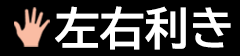
<style>
.page{position:relative;width:240px;height:56px;background:#000000}
.page>*{position:absolute;margin:0}
.t1{font:44.8px "BIZ-UDPGothic-Bold";color:#ffffff}
</style>
<div class="page">
<p class="t1" style="left:55px;top:6px;width:176px;height:44px">左右利き</p>
</div>
